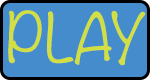
<style>
.page{position:relative;width:150px;height:80px;background:#448ccb}
.page>*{position:absolute;margin:0}
.t1{font:60px "Noteworthy-Light";color:#d1de44}
</style>
<div class="page">
<p class="t1" style="left:8px;top:10px;width:138px;height:56px">PLAY</p>
</div>
